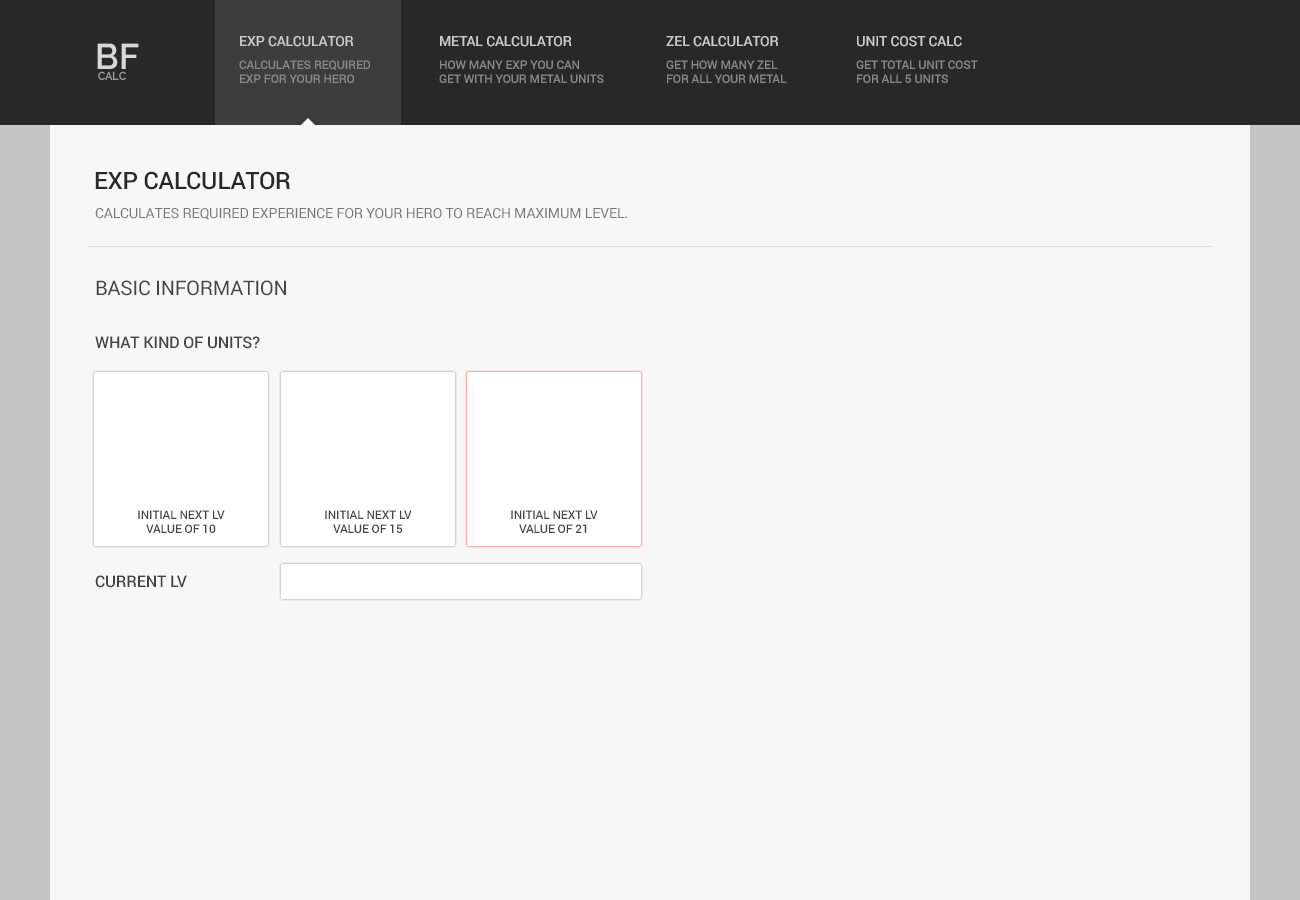
<style>
.page{position:relative;width:1300px;height:900px;background:#f7f7f7}
.page>*{position:absolute;margin:0}
.t1{font:14px "Roboto-Medium";letter-spacing:-0.01em;color:#cccccc;text-transform:uppercase}
.t2{font:35.6px "Raleway-SemiBold";letter-spacing:-0.01em;color:#d7d7d7;text-transform:uppercase}
.t3{font:12px "Roboto-Medium";letter-spacing:-0.01em;color:#888888;text-transform:uppercase}
.t4{font:11.5px "Raleway-SemiBold";letter-spacing:-0.01em;color:#9e9e9e;text-transform:uppercase;scale:0.96 1}
.t5{font:24px "Roboto-Medium";letter-spacing:-0.01em;color:#282828;text-transform:uppercase}
.t6{font:14px "Roboto-Regular";letter-spacing:-0.01em;color:#777777;text-transform:uppercase}
.t7{font:20px "Roboto-Regular";letter-spacing:-0.01em;color:#444444;text-transform:uppercase}
.t8{font:16px "Roboto-Medium";letter-spacing:-0.01em;color:#444444;text-transform:uppercase}
.t9{font:12px "Roboto-Medium";letter-spacing:-0.01em;color:#444444;text-transform:uppercase}
</style>
<div class="page">
<p class="t1" style="left:240px;top:36px;width:114px;height:11px">EXP Calculator</p>
<p class="t1" style="left:440px;top:36px;width:132px;height:11px">Metal Calculator</p>
<p class="t1" style="left:666px;top:36px;width:113px;height:11px">ZEL Calculator</p>
<p class="t1" style="left:857px;top:36px;width:105px;height:11px">Unit Cost Calc</p>
<p class="t2" style="left:97px;top:43px;width:42px;height:26px">BF</p>
<p class="t3" style="left:239px;top:60px;width:131px;height:23px">calculates required<br>exp for your hero</p>
<p class="t3" style="left:439px;top:60px;width:165px;height:23px">How many exp you can<br>get with your metal units</p>
<p class="t3" style="left:666px;top:60px;width:121px;height:23px">Get How many Zel<br>for all your metal</p>
<p class="t3" style="left:856px;top:60px;width:122px;height:23px">Get Total unit Cost<br>for all 5 units</p>
<p class="t4" style="left:98px;top:71px;width:28px;height:9px">calc</p>
<p class="t5" style="left:95px;top:171px;width:195px;height:19px">EXP Calculator</p>
<p class="t6" style="left:95px;top:208px;width:532px;height:12px">calculates required experience for your hero to reach maximum level.</p>
<p class="t7" style="left:96px;top:280px;width:190px;height:16px">Basic Information</p>
<p class="t8" style="left:95px;top:336px;width:165px;height:13px">What kind of units?</p>
<p class="t9" style="left:138px;top:510px;width:87px;height:23px;text-align:center">initial next lv<br>value of 10</p>
<p class="t9" style="left:325px;top:510px;width:87px;height:23px;text-align:center">initial next lv<br>value of 15</p>
<p class="t9" style="left:511px;top:510px;width:87px;height:23px;text-align:center">initial next lv<br>value of 21</p>
<p class="t8" style="left:95px;top:575px;width:92px;height:13px">Current Lv</p>
</div>
